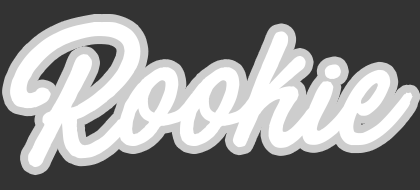
<style>
.page{position:relative;width:420px;height:190px;background:#333333}
.page>*{position:absolute;margin:0}
.t1{font:150px "PaintedParadise";color:#ffffff}
</style>
<div class="page">
<p class="t1" style="left:10px;top:22px;width:403px;height:146px">Rookie</p>
</div>
